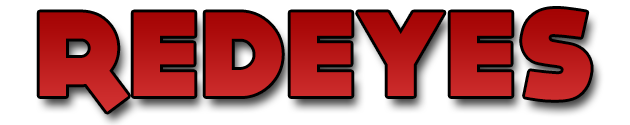
<style>
.page{position:relative;width:630px;height:125px;background:#ffffff}
.page>*{position:absolute;margin:0}
.t1{font:120px "DOCK11-Heavy";letter-spacing:0.025em;color:#b71616}
</style>
<div class="page">
<p class="t1" style="left:39px;top:9px;width:552px;height:103px">REDEYES</p>
</div>
